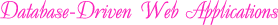
<style>
.page{position:relative;width:278px;height:25px;background:#ffffff}
.page>*{position:absolute;margin:0}
.t1{font:24px "UkrainianDecor";color:#fc24bc}
</style>
<div class="page">
<p class="t1" style="left:0px;top:0px;width:279px;height:25px">Database-Driven Web Applications</p>
</div>
